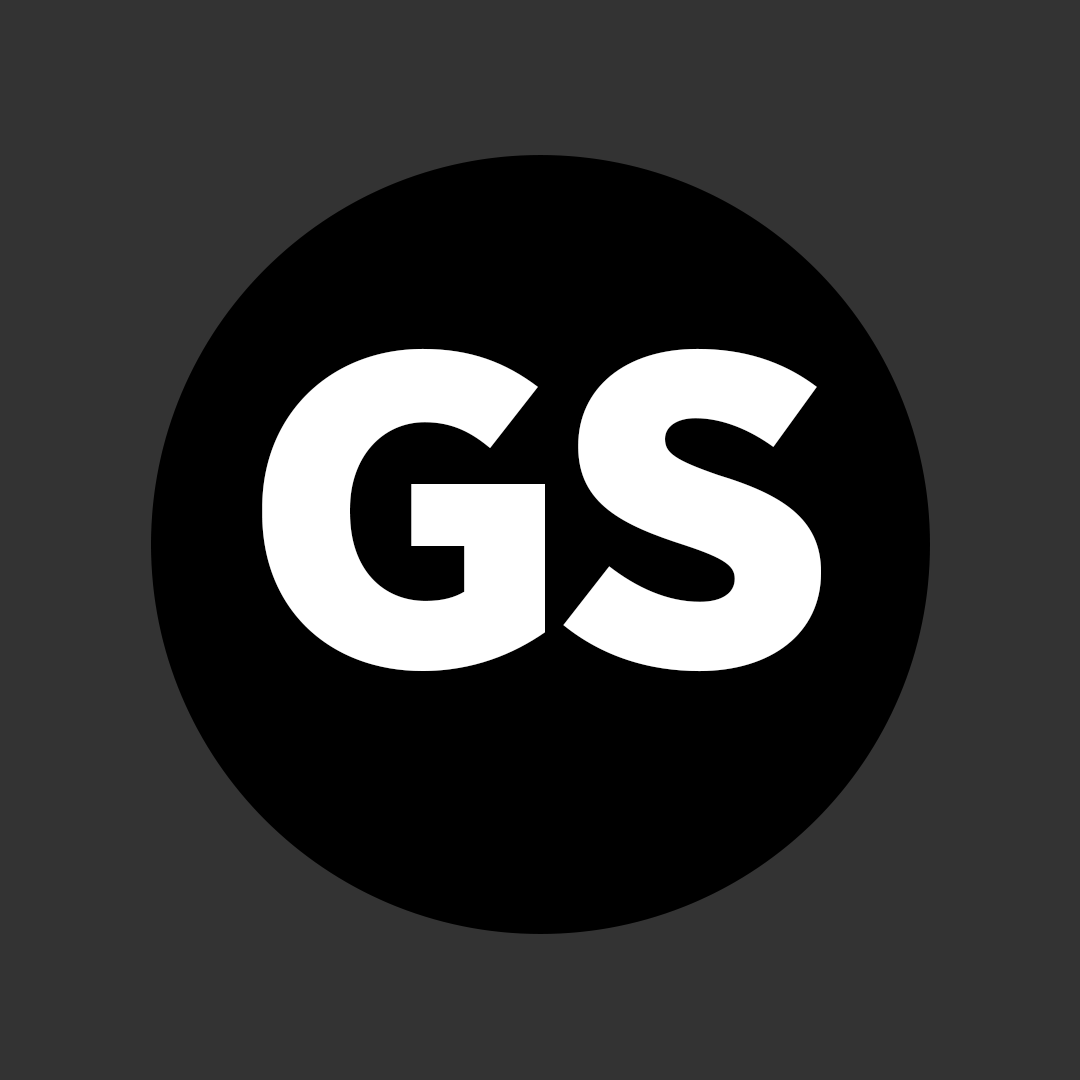
<style>
.page{position:relative;width:1080px;height:1080px;background:#333333}
.page>*{position:absolute;margin:0}
.t1{font:446px "GothamNarrow-Black";color:#ffffff;scale:1.07 1}
</style>
<div class="page">
<p class="t1" style="left:262px;top:348px;width:559px;height:324px">GS</p>
</div>
